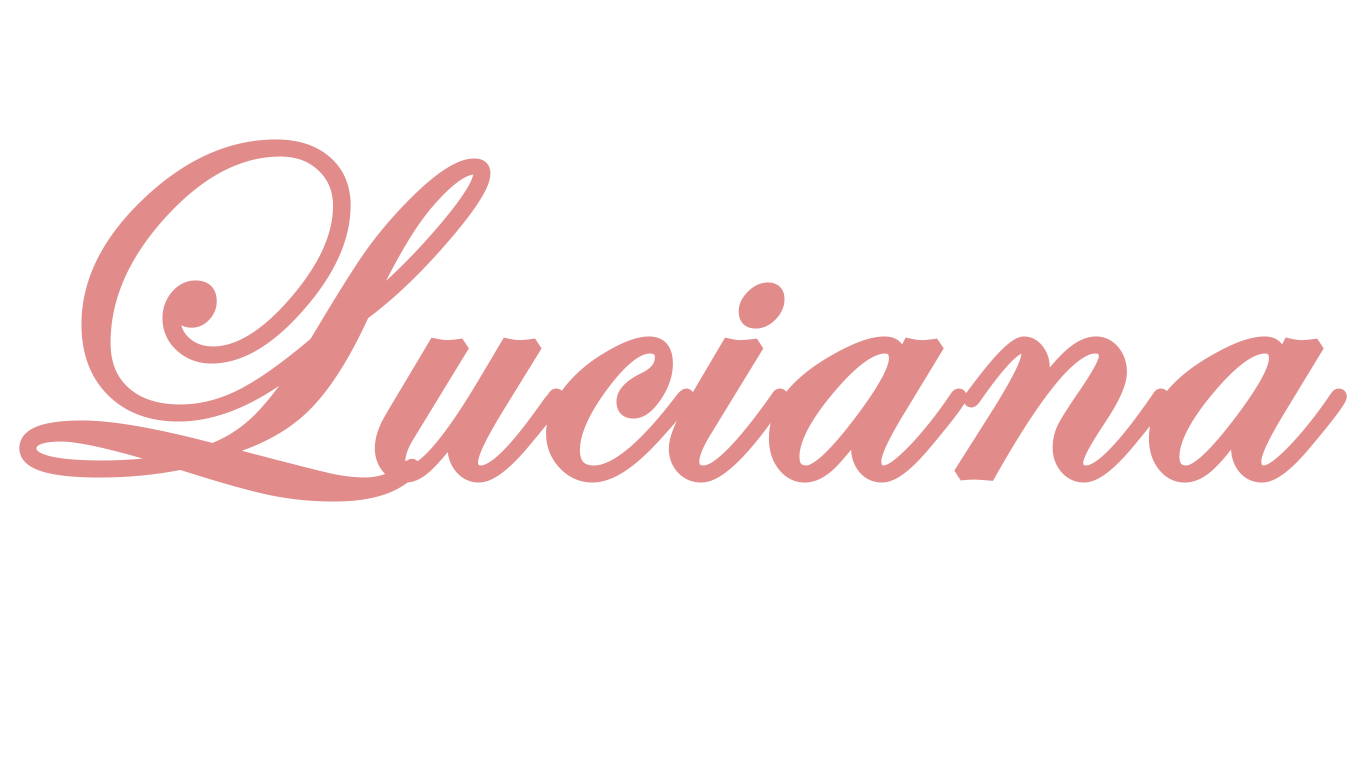
<style>
.page{position:relative;width:1366px;height:768px;background:#ffffff}
.page>*{position:absolute;margin:0}
.t1{font:482.1px "EdwardianScriptITC";color:#e18b8b;font-weight:bold}
</style>
<div class="page">
<p class="t1" style="left:19px;top:139px;width:1328px;height:363px">Luciana</p>
</div>
